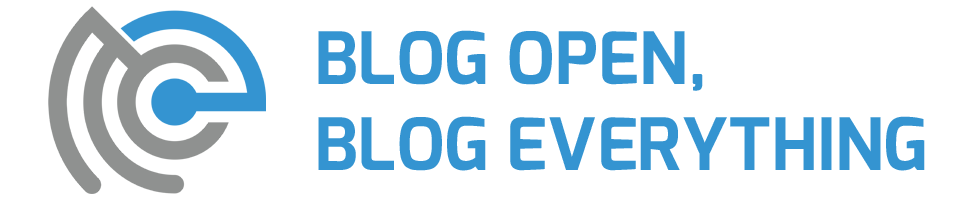
<style>
.page{position:relative;width:960px;height:200px;background:#ffffff}
.page>*{position:absolute;margin:0}
.t1{font:72px "Exo-Bold";color:#3494d1}
</style>
<div class="page">
<p class="t1" style="left:318px;top:30px;width:607px;height:141px">BLOG OPEN,<br>BLOG EVERYTHING</p>
</div>
